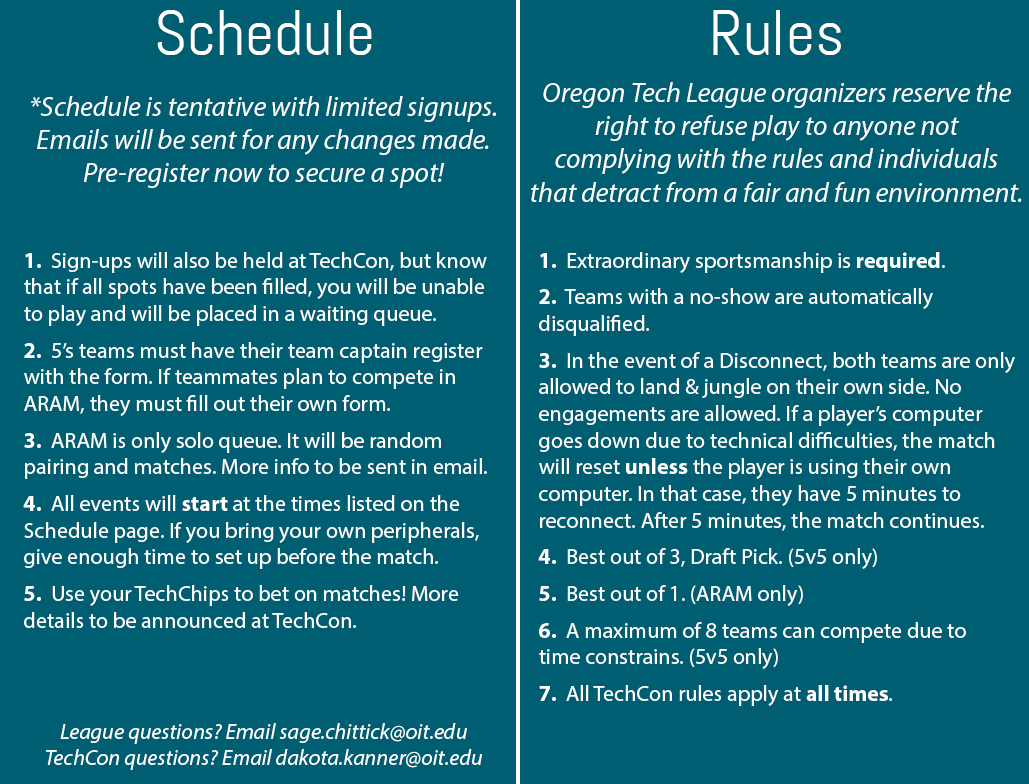
<style>
.page{position:relative;width:1029px;height:784px;background:#005e73}
.page>*{position:absolute;margin:0}
.t1{font:64.1px "Abel-Regular";color:#ffffff}
.t2{font:27.8px "MyriadPro-It";color:#ffffff}
.t3{font:22.2px "MyriadPro-Regular";color:#ffffff}
.t4{font:22.2px "MyriadPro-Bold";color:#ffffff}
.t5{font:22.2px "MyriadPro-It";color:#ffffff}
</style>
<div class="page">
<p class="t1" style="left:157px;top:10px;width:215px;height:45px">Schedule</p>
<p class="t1" style="left:713px;top:10px;width:128px;height:45px">Rules</p>
<p class="t2" style="left:531px;top:82px;width:491px;height:120px;text-align:center">Oregon Tech League organizers reserve the<br>right to refuse play to anyone not<br>complying with the rules and individuals<br>that detract from a fair and fun environment.</p>
<p class="t2" style="left:31px;top:96px;width:465px;height:92px;text-align:center">*Schedule is tentative with limited signups.<br>Emails will be sent for any changes made.<br>Pre-register now to secure a spot!</p>
<p class="t3" style="left:23px;top:252px;width:464px;height:376px"><span class="t4">1.</span>  Sign-ups will also be held at TechCon, but know <br>that if all spots have been filled, you will be unable <br>to play and will be placed in a waiting queue.<br><br><span class="t4">2.</span>  5’s teams must have their team captain register <br>with the form. If teammates plan to compete in <br>ARAM, they must fill out their own form.<br><br><span class="t4">3.</span>  ARAM is only solo queue. It will be random <br>pairing and matches. More info to be sent in email.<br><br><span class="t4">4.</span>  All events will <span class="t4">start</span> at the times listed on the <br>Schedule page. If you bring your own peripherals, <br>give enough time to set up before the match.<br><br><span class="t4">5.</span>  Use your TechChips to bet on matches! More<br>details to be announced at TechCon.</p>
<p class="t3" style="left:538px;top:252px;width:477px;height:454px"><span class="t4">1.</span>  Extraordinary sportsmanship is <span class="t4">required</span>.<br><br><span class="t4">2.</span>  Teams with a no-show are automatically <br>disqualified.<br><br><span class="t4">3.</span>  In the event of a Disconnect, both teams are only<br>allowed to land &amp; jungle on their own side. No<br>engagements are allowed. If a player’s computer <br>goes down due to technical difficulties, the match <br>will reset <span class="t4">unless</span> the player is using their own <br>computer. In that case, they have 5 minutes to <br>reconnect. After 5 minutes, the match continues.<br><br><span class="t4">4.</span>  Best out of 3, Draft Pick. (5v5 only)<br><br><span class="t4">5.</span>  Best out of 1. (ARAM only)<br><br><span class="t4">6.</span>  A maximum of 8 teams can compete due to <br>time constrains. (5v5 only)<br><br><span class="t4">7.</span>  All TechCon rules apply at <span class="t4">all times</span>.</p>
<p class="t5" style="left:46px;top:723px;width:436px;height:47px;text-align:center">League questions? Email sage.chittick@oit.edu<br>TechCon questions? Email dakota.kanner@oit.edu</p>
</div>
